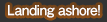
<style>
.page{position:relative;width:107px;height:22px;background:#333333}
.page>*{position:absolute;margin:0}
.t1{font:14px "FutoGoB101Pr5-Bold";letter-spacing:-0.04em;color:#ffffff}
</style>
<div class="page">
<p class="t1" style="left:8px;top:5px;width:92px;height:13px">Landing ashore!</p>
</div>
